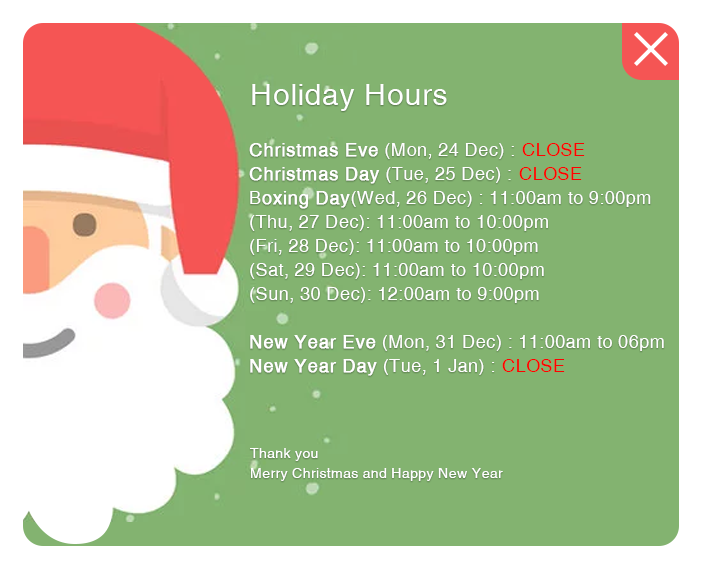
<style>
.page{position:relative;width:703px;height:569px;background:#83b370}
.page>*{position:absolute;margin:0}
.t1{font:30px "VNI-Helve";color:#fefffe}
.t2{font:18px/14px "VNI-Helve";color:#ffffff}
.t3{font:18px/14px "VNI-Helve";color:#ffffff;font-weight:bold}
.t4{font:18px "VNI-Helve";color:#ff0000}
.t5{font:14px/10px "VNI-Helve";color:#ffffff}
</style>
<div class="page">
<p class="t1" style="left:252px;top:84px;width:195px;height:27px">Holiday Hours</p>
<p class="t2" style="left:249px;top:143px;width:415px;height:233px"><span class="t3">Christmas Eve</span> (Mon, 24 Dec) : <br><span class="t3">Christmas Day</span> (Tue, 25 Dec) : <br>B<span class="t3">oxing Day</span>(Wed, 26 Dec) : 11:00am to 9:00pm<br>(Thu, 27 Dec): 11:00am to 10:00pm<br>(Fri, 28 Dec): 11:00am to 10:00pm<br>(Sat, 29 Dec): 11:00am to 10:00pm<br>(Sun, 30 Dec): 12:00am to 9:00pm<br><br><span class="t3">New Year Eve</span> (Mon, 31 Dec) : 11:00am to 06pm<br><span class="t3">New Year Day</span> (Tue, 1 Jan) :</p>
<p class="t4" style="left:522px;top:143px;width:63px;height:13px">CLOSE</p>
<p class="t4" style="left:519px;top:167px;width:63px;height:13px">CLOSE</p>
<p class="t4" style="left:502px;top:359px;width:63px;height:13px">CLOSE</p>
<p class="t5" style="left:250px;top:448px;width:253px;height:33px">Thank you<br>Merry Christmas and Happy New Year</p>
</div>
